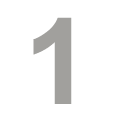
<style>
.page{position:relative;width:120px;height:120px;background:#ffffff}
.page>*{position:absolute;margin:0}
.t1{font:120px "Arial-BoldMT";letter-spacing:-0.075em;color:#a1a09d}
</style>
<div class="page">
<p class="t1" style="left:33px;top:17px;width:39px;height:87px">1</p>
</div>
